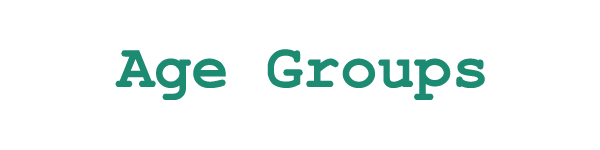
<style>
.page{position:relative;width:600px;height:150px;background:#ffffff}
.page>*{position:absolute;margin:0}
.t1{font:62px "CourierNewPS-BoldMT";color:#1d8b72}
</style>
<div class="page">
<p class="t1" style="left:115px;top:49px;width:370px;height:51px">Age Groups</p>
</div>
